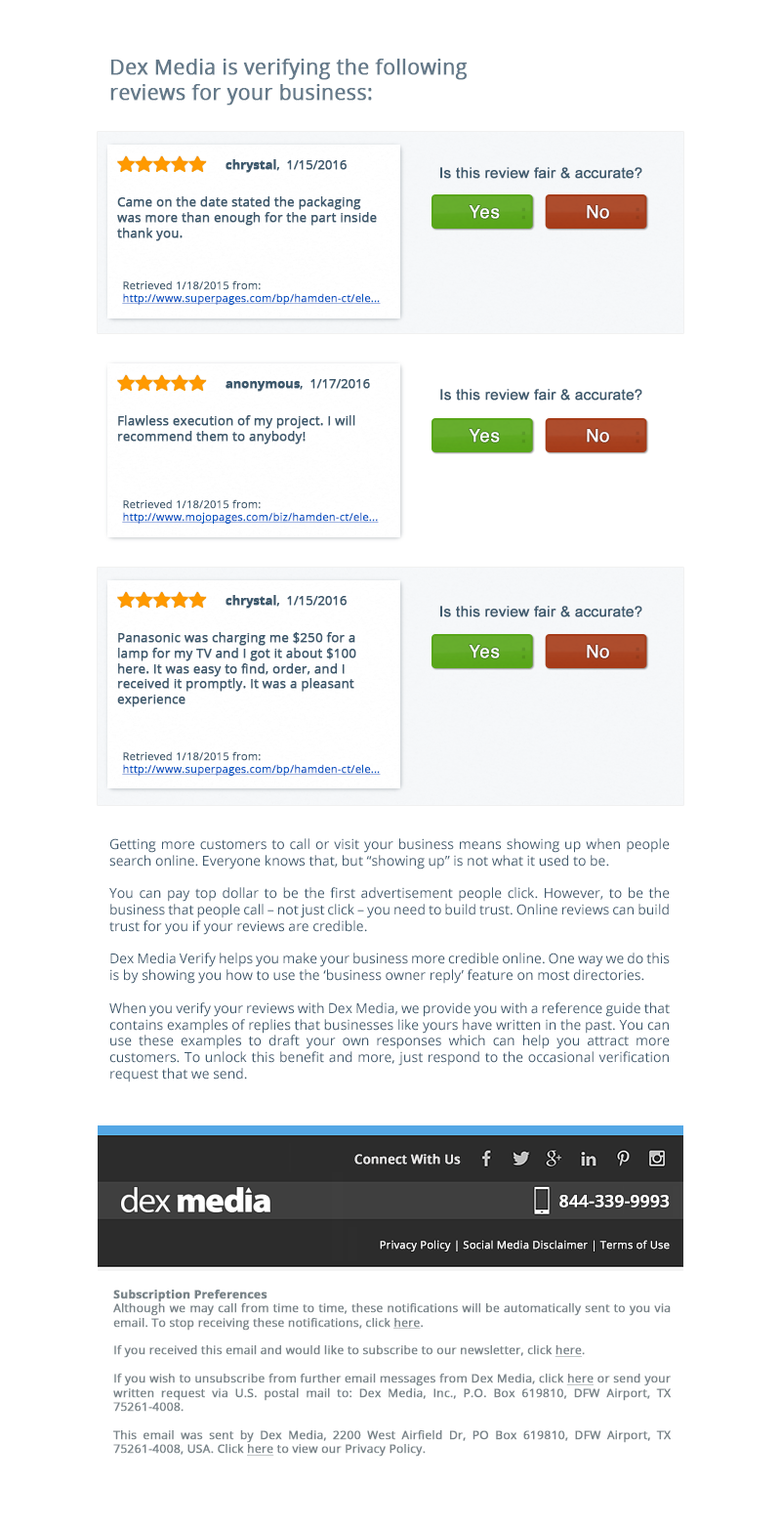
<style>
.page{position:relative;width:781px;height:1526px;background:#ffffff}
.page>*{position:absolute;margin:0}
.t1{font:20.5px "OpenSans";color:#647989;font-weight:bold}
.t2{font:12.7px "OpenSans";letter-spacing:-0.025em;color:#3d596d;font-weight:bold}
.t3{font:12.7px "OpenSans-Bold";letter-spacing:-0.025em;color:#3d596d;font-weight:bold}
.t4{font:14.7px "ArialMT";color:#3d596d;font-weight:bold}
.t5{font:12.7px "OpenSans";color:#3d596d;font-weight:bold}
.t6{font:17.5px "Helvetica";letter-spacing:0.03em;color:#ffffff;font-weight:bold}
.t7{font:18.6px "HelveticaNeue-Bold";letter-spacing:0.1em;color:#569820;font-weight:bold}
.t8{font:18.6px "HelveticaNeue-Bold";letter-spacing:0.1em;color:#993f22;font-weight:bold}
.t9{font:10.7px "OpenSans";color:#0152c1;font-weight:bold;text-decoration:underline}
.t10{font:10.7px "OpenSans";color:#3d596d;font-weight:bold}
.t11{font:13.7px "OpenSans";color:#3d596d}
.t12{font:12.7px "OpenSans-Semibold";color:#e8e7e7;font-weight:bold}
.t13{font:16.6px "OpenSans-Semibold";color:#ffffff;font-weight:bold}
.t14{font:10.7px "OpenSans";color:#ffffff;font-weight:bold}
.t15{font:11.7px "OpenSans";color:#798489;font-weight:bold}
.t16{font:11.7px "OpenSans-Bold";color:#798489;font-weight:bold}
.t17{font:11.7px "OpenSans";color:#798489;font-weight:bold;text-decoration:underline}
</style>
<div class="page">
<p class="t1" style="left:110px;top:59px;width:358px;height:47px">Dex Media is verifying the following reviews for your business:</p>
<p class="t2" style="left:226px;top:159px;width:121px;height:14px"><span class="t3">chrystal</span>,  1/15/2016</p>
<p class="t4" style="left:441px;top:167px;width:202px;height:12px">Is this review fair &amp; accurate?</p>
<p class="t5" style="left:117px;top:196px;width:260px;height:45px">Came on the date stated the packaging was more than enough for the part inside thank you.</p>
<p class="t6" style="left:469px;top:205px;width:31px;height:14px">Yes</p>
<p class="t7" style="left:522px;top:207px;width:4px;height:13px;rotate:-90deg">..</p>
<p class="t6" style="left:587px;top:205px;width:23px;height:14px">No</p>
<p class="t8" style="left:636px;top:207px;width:4px;height:13px;rotate:-90deg">..</p>
<p class="t9" style="left:122px;top:280px;width:259px;height:25px"><span class="t10">Retrieved 1/18/2015 from: </span>http://www.superpages.com/bp/hamden-ct/ele...</p>
<p class="t2" style="left:226px;top:379px;width:144px;height:13px"><span class="t3">anonymous</span>,  1/17/2016</p>
<p class="t4" style="left:441px;top:389px;width:202px;height:12px">Is this review fair &amp; accurate?</p>
<p class="t5" style="left:118px;top:415px;width:238px;height:29px">Flawless execution of my project. I will recommend them to anybody!</p>
<p class="t6" style="left:469px;top:429px;width:31px;height:14px">Yes</p>
<p class="t7" style="left:522px;top:431px;width:4px;height:12px;rotate:-90deg">..</p>
<p class="t6" style="left:587px;top:429px;width:23px;height:14px">No</p>
<p class="t8" style="left:636px;top:431px;width:4px;height:12px;rotate:-90deg">..</p>
<p class="t9" style="left:122px;top:499px;width:257px;height:25px"><span class="t10">Retrieved 1/18/2015 from: </span>http://www.mojopages.com/biz/hamden-ct/ele...</p>
<p class="t2" style="left:226px;top:595px;width:121px;height:14px"><span class="t3">chrystal</span>,  1/15/2016</p>
<p class="t4" style="left:441px;top:606px;width:202px;height:11px">Is this review fair &amp; accurate?</p>
<p class="t5" style="left:117px;top:632px;width:240px;height:75px">Panasonic was charging me $250 for a lamp for my TV and I got it about $100 here. It was easy to find, order, and I received it promptly. It was a pleasant experience</p>
<p class="t6" style="left:469px;top:645px;width:31px;height:13px">Yes</p>
<p class="t7" style="left:522px;top:647px;width:4px;height:12px;rotate:-90deg">..</p>
<p class="t6" style="left:587px;top:645px;width:23px;height:13px">No</p>
<p class="t8" style="left:636px;top:647px;width:4px;height:12px;rotate:-90deg">..</p>
<p class="t9" style="left:122px;top:751px;width:259px;height:25px"><span class="t10">Retrieved 1/18/2015 from: </span>http://www.superpages.com/bp/hamden-ct/ele...</p>
<p class="t11" style="left:109px;top:838px;width:561px;height:244px;text-align:justify">Getting more customers to call or visit your business means showing up when people search online. Everyone knows that, but “showing up” is not what it used to be. <br><br>You can pay top dollar to be the first advertisement people click. However, to be the business that people call – not just click – you need to build trust. Online reviews can build trust for you if your reviews are credible. <br><br>Dex Media Verify helps you make your business more credible online. One way we do this is by showing you how to use the ‘business owner reply’ feature on most directories. <br><br>When you verify your reviews with Dex Media, we provide you with a reference guide that contains examples of replies that businesses like yours have written in the past. You can use these examples to draft your own responses which can help you attract more customers. To unlock this benefit and more, just respond to the occasional verification request that we send.</p>
<p class="t12" style="left:355px;top:1154px;width:106px;height:10px">Connect With Us</p>
<p class="t13" style="left:560px;top:1195px;width:110px;height:12px">844-339-9993</p>
<p class="t14" style="left:380px;top:1240px;width:290px;height:11px">Privacy Policy | Social Media Disclaimer | Terms of Use</p>
<p class="t15" style="left:113px;top:1289px;width:558px;height:167px;text-align:justify"><span class="t16">Subscription Preferences<br></span>Although we may call from time to time, these notifications will be automatically sent to you via email. To stop receiving these notifications, click <span class="t17">here</span>. <br><br>If you received this email and would like to subscribe to our newsletter, click <span class="t17">here</span>.<br> <br>If you wish to unsubscribe from further email messages from Dex Media, click <span class="t17">here</span> or send your written request via U.S. postal mail to: Dex Media, Inc., P.O. Box 619810, DFW Airport, TX 75261-4008.<br> <br>This email was sent by Dex Media, 2200 West Airfield Dr, PO Box 619810, DFW Airport, TX 75261-4008, USA. Click <span class="t17">here</span> to view our Privacy Policy.<br> <br>© 2016 Dex Media. All rights reserved.</p>
</div>
